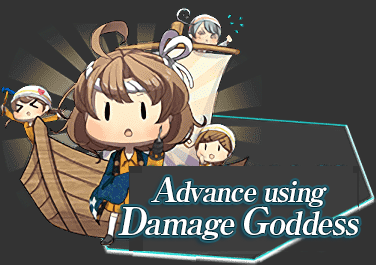
<style>
.page{position:relative;width:376px;height:265px;background:#333333}
.page>*{position:absolute;margin:0}
.t1{font:28px/30px "RyuminPro-ExBold";letter-spacing:-0.06em;color:#ffffff;font-style:italic}
.t2{font:34px/30px "RyuminPro-ExBold";letter-spacing:-0.06em;color:#ffffff;font-style:italic}
.t3{font:38px/30px "RyuminPro-ExBold";letter-spacing:-0.06em;color:#ffffff;font-style:italic}
.t4{font:32px/30px "RyuminPro-ExBold";letter-spacing:-0.06em;color:#ffffff;font-style:italic}
</style>
<div class="page">
<p class="t1" style="left:118px;top:177px;width:241px;height:63px;text-align:center"><span class="t2">A</span>dvance using<br><span class="t3">D</span><span class="t4">amage </span><span class="t3">G</span><span class="t4">oddess</span></p>
</div>
